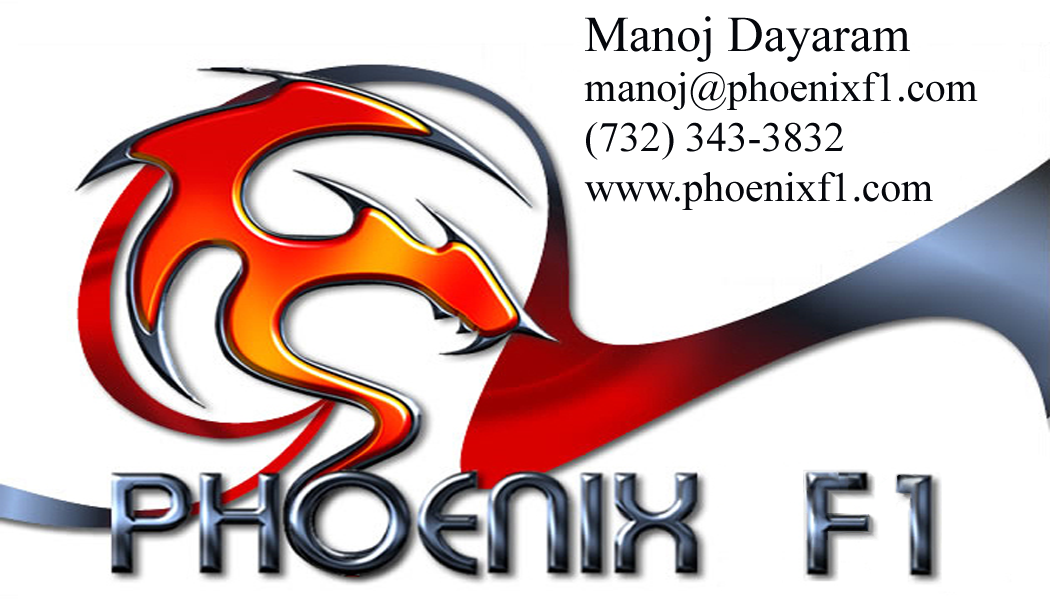
<style>
.page{position:relative;width:1050px;height:600px;background:#ffffff}
.page>*{position:absolute;margin:0}
.t1{font:41.7px "TimesNewRomanPSMT";color:#05070c}
.t2{font:50px "TimesNewRomanPSMT";color:#05070c}
</style>
<div class="page">
<p class="t1" style="left:584px;top:16px;width:394px;height:194px"><span class="t2">Manoj Dayaram<br></span>manoj@phoenixf1.com<br>(732) 343-3832<br>www.phoenixf1.com</p>
</div>
